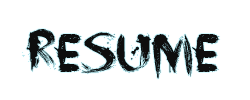
<style>
.page{position:relative;width:250px;height:100px;background:#ffffff}
.page>*{position:absolute;margin:0}
.t1{font:60px "FaceYourFears";color:#0e0e0e}
</style>
<div class="page">
<p class="t1" style="left:22px;top:29px;width:198px;height:50px">Resume</p>
</div>
